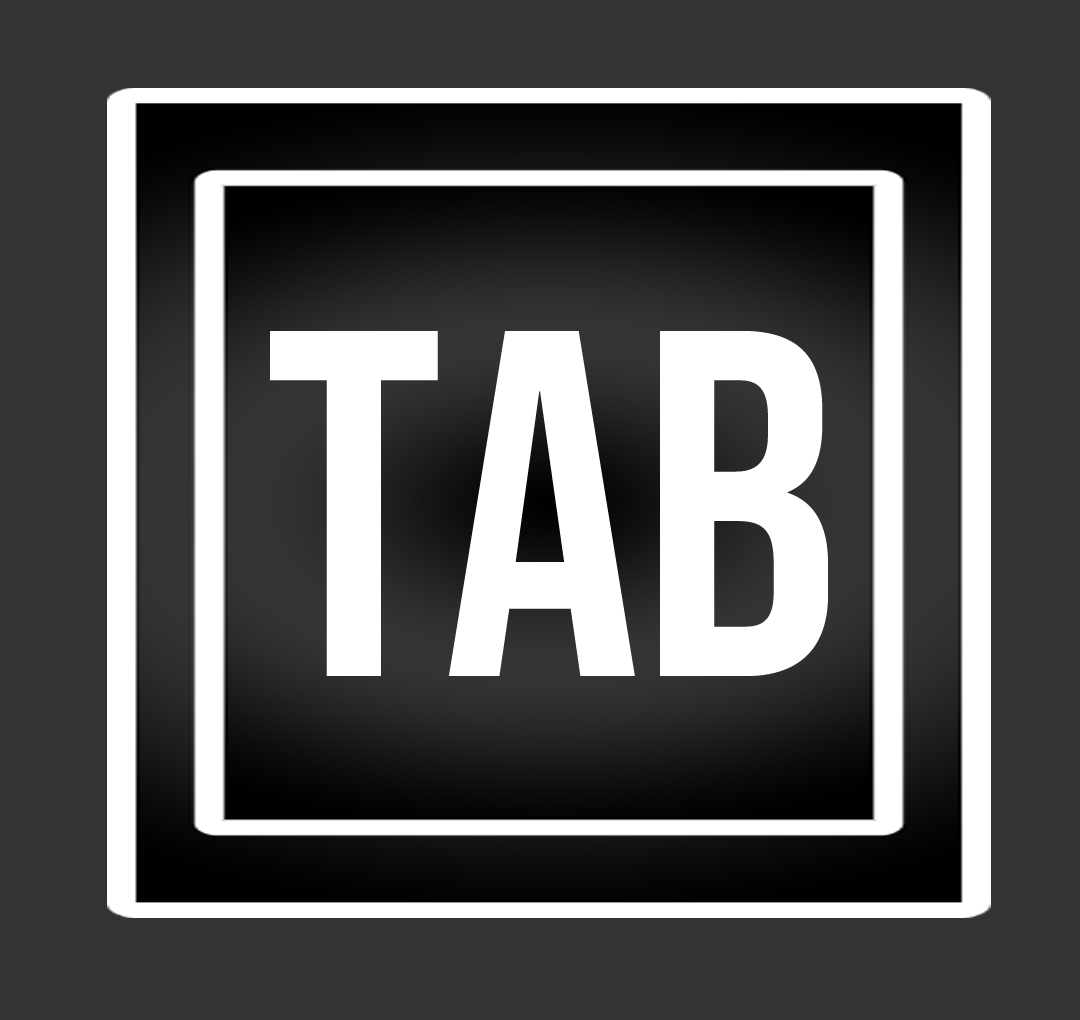
<style>
.page{position:relative;width:1080px;height:1020px;background:#333333}
.page>*{position:absolute;margin:0}
.t1{font:492.5px "BebasNeue-Regular";color:#ffffff}
</style>
<div class="page">
<p class="t1" style="left:270px;top:331px;width:558px;height:345px">TAB</p>
</div>
